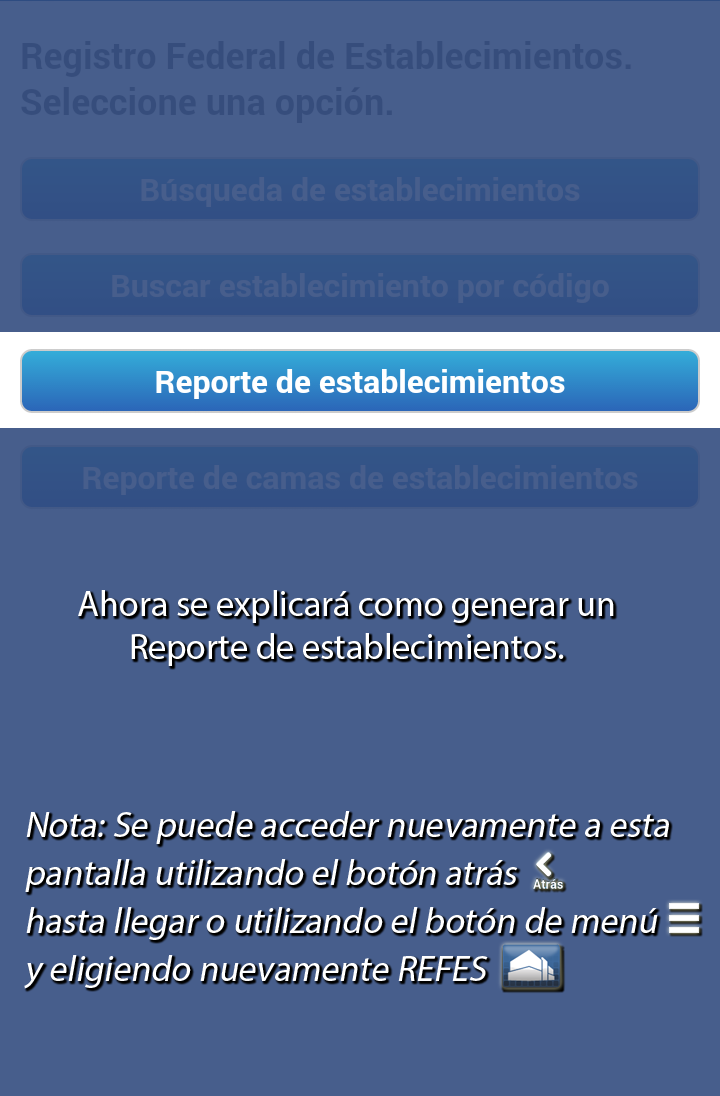
<style>
.page{position:relative;width:720px;height:1096px;background:#475e8c}
.page>*{position:absolute;margin:0}
.t1{font:36px "MyriadPro-Regular";color:#ffffff}
.t2{font:36px/48px "MyriadPro-Regular";color:#ffffff;font-style:italic}
</style>
<div class="page">
<p class="t1" style="left:78px;top:590px;width:536px;height:76px;text-align:center">Ahora se explicará como generar un<br>Reporte de establecimientos.</p>
<p class="t2" style="left:24px;top:811px;width:645px;height:178px">Nota: Se puede acceder nuevamente a esta<br>pantalla utilizando el botón atrás<br>hasta llegar o utilizando el botón de menú<br>y eligiendo nuevamente REFES</p>
</div>
